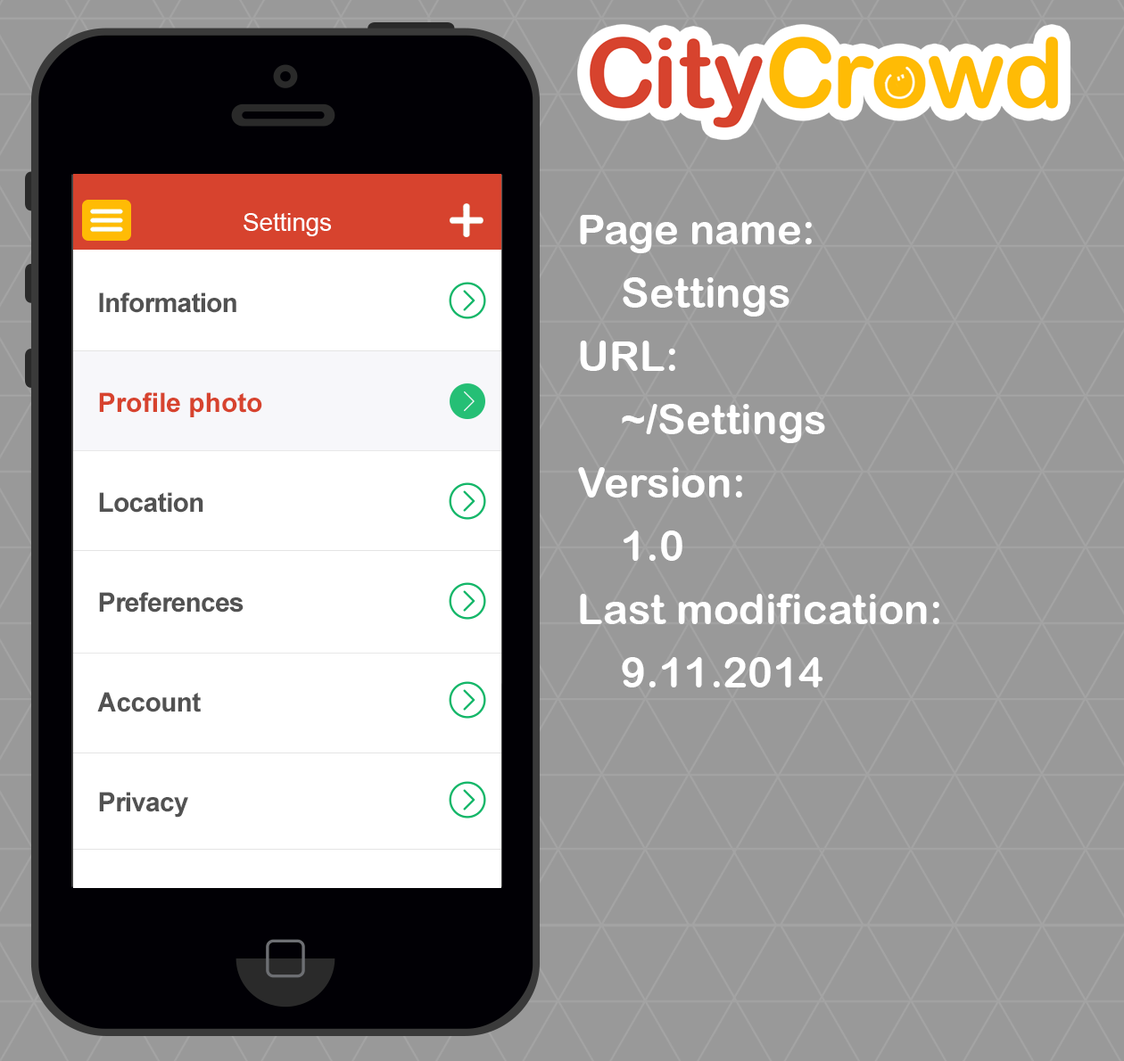
<style>
.page{position:relative;width:1124px;height:1061px;background:#999999}
.page>*{position:absolute;margin:0}
.t1{font:24.6px "ArialMT";color:#ffffff}
.t2{font:42.2px/63.3px "ArialRoundedMTBold";color:#ffffff}
.t3{font:26.8px/99.9px "Arial-BoldMT";letter-spacing:-0.025em;color:#525252}
.t4{font:26.8px/99.9px "Arial-BoldMT";color:#d7432e}
</style>
<div class="page">
<p class="t1" style="left:243px;top:213px;width:88px;height:23px">Settings</p>
<p class="t2" style="left:578px;top:215px;width:361px;height:473px">Page name:<br>Settings<br>URL:<br>~/Settings<br>Version:<br>1.0<br>Last modification:<br>9.11.2014</p>
<p class="t3" style="left:97px;top:293px;width:165px;height:525px">Information<br><span class="t4">Profile photo<br></span>Location<br>Preferences<br>Account<br>Privacy</p>
</div>
